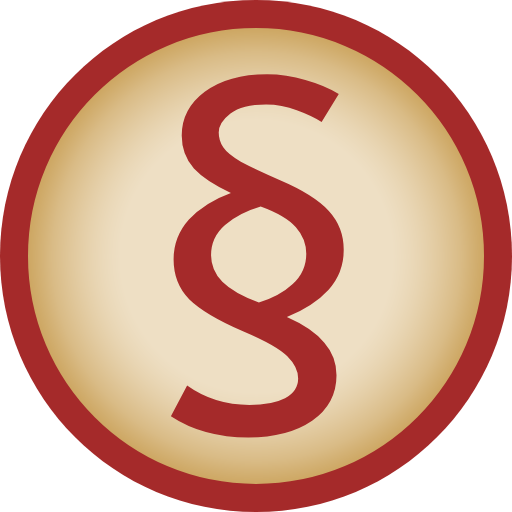
<style>
.page{position:relative;width:512px;height:512px;background:#a52a2a}
.page>*{position:absolute;margin:0}
.t1{font:451.3px "ABeeZee-Regular";color:#a52a2a}
</style>
<div class="page">
<p class="t1" style="left:171px;top:74px;width:173px;height:364px">§</p>
</div>
